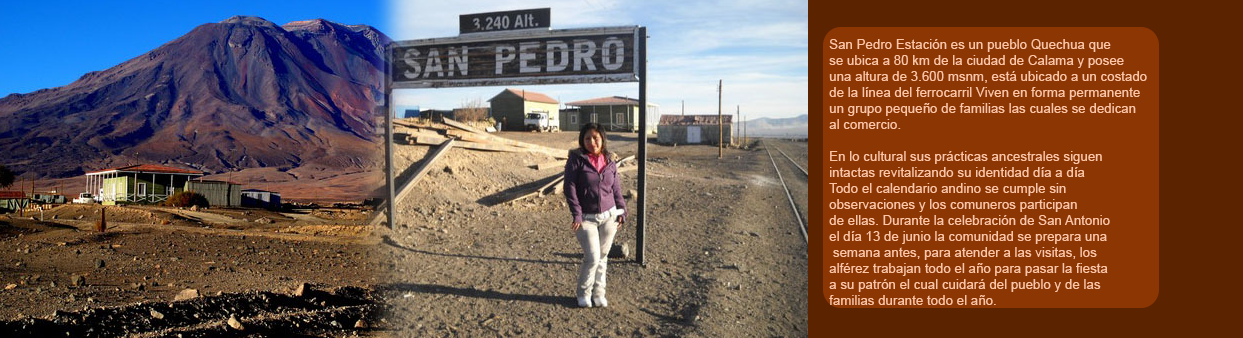
<style>
.page{position:relative;width:1243px;height:338px}
.page>*{position:absolute;margin:0}
.t1{font:13.3px "ArialMT";color:#fdc5a3}
</style>
<div class="page">
<p class="t1" style="left:829px;top:39px;width:318px;height:266px">San Pedro Estación es un pueblo Quechua que<br>se ubica a 80 km de la ciudad de Calama y posee<br>una altura de 3.600 msnm, está ubicado a un costado<br>de la línea del ferrocarril Viven en forma permanente<br>un grupo pequeño de familias las cuales se dedican<br>al comercio.<br><br>En lo cultural sus prácticas ancestrales siguen<br>intactas revitalizando su identidad día a día<br>Todo el calendario andino se cumple sin<br>observaciones y los comuneros participan<br>de ellas. Durante la celebración de San Antonio<br>el día 13 de junio la comunidad se prepara una<br> semana antes, para atender a las visitas, los<br>alférez trabajan todo el año para pasar la fiesta<br>a su patrón el cual cuidará del pueblo y de las<br>familias durante todo el año.</p>
</div>
